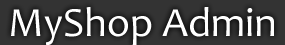
<style>
.page{position:relative;width:285px;height:45px;background:#333333}
.page>*{position:absolute;margin:0}
.t1{font:41.7px "Candara";color:#ffffff}
</style>
<div class="page">
<p class="t1" style="left:11px;top:7px;width:263px;height:39px">MyShop Admin</p>
</div>
